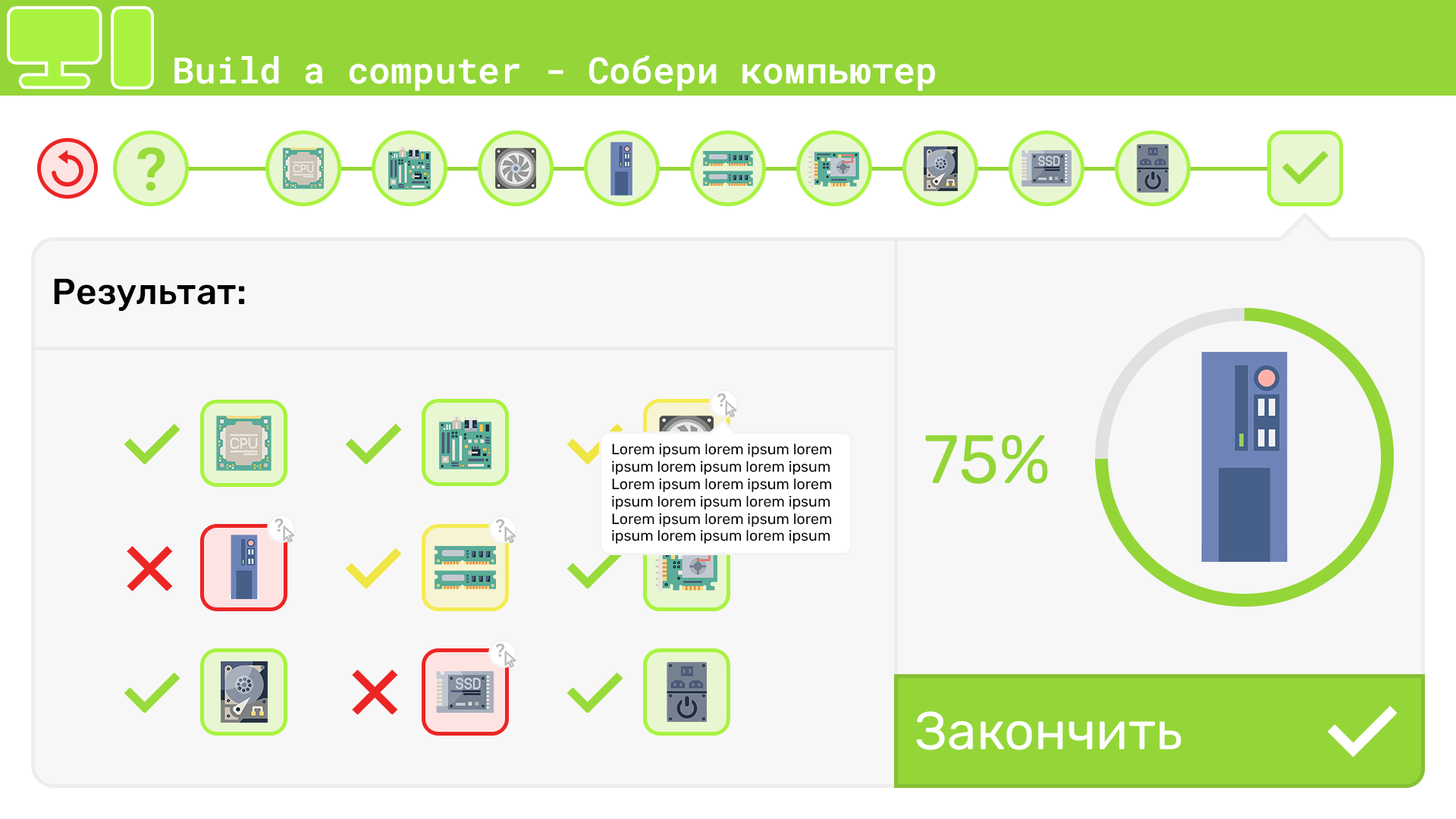
<style>
.page{position:relative;width:1456px;height:819px;background:#f7f7f7}
.page>*{position:absolute;margin:0}
.t1{font:36.4px "RobotoMono-SemiBold";color:#ffffff}
.t2{font:59.7px "RobotoMono-Bold";color:#98db3a}
.t3{font:36.4px "Rubik-Medium";color:#000000}
.t4{font:18.2px "RobotoMono-Bold";color:#bbbbbb}
.t5{font:68.2px "Rubik-Regular";color:#94d637}
.t6{font:14.9px/17.3px "Rubik-Regular";color:#000000}
.t7{font:53.1px "Rubik-Regular";color:#fefefe}
</style>
<div class="page">
<p class="t1" style="left:174px;top:55px;width:761px;height:36px">Build a computer - Собери компьютер</p>
<p class="t2" style="left:137px;top:147px;width:28px;height:44px">?</p>
<p class="t3" style="left:54px;top:278px;width:191px;height:33px">Результат:</p>
<p class="t4" style="left:717px;top:393px;width:9px;height:14px">?</p>
<p class="t5" style="left:925px;top:435px;width:123px;height:49px">75%</p>
<p class="t6" style="left:612px;top:443px;width:220px;height:101px">Lorem ipsum lorem ipsum lorem ipsum lorem ipsum lorem ipsum<br>Lorem ipsum lorem ipsum lorem ipsum lorem ipsum lorem ipsum<br>Lorem ipsum lorem ipsum lorem ipsum lorem ipsum lorem ipsum</p>
<p class="t4" style="left:275px;top:518px;width:9px;height:14px">?</p>
<p class="t4" style="left:496px;top:519px;width:8px;height:14px">?</p>
<p class="t4" style="left:496px;top:643px;width:8px;height:14px">?</p>
<p class="t7" style="left:916px;top:711px;width:265px;height:39px">Закончить</p>
</div>
